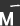
<style>
.page{position:relative;width:20px;height:26px;background:#333333}
.page>*{position:absolute;margin:0}
.t1{font:12px "DFKaiShu-SB-Estd-BF";color:#ffffff;font-weight:bold}
.t2{font:18px "ArialMT";color:#ffffff;font-weight:bold}
</style>
<div class="page">
<p class="t1" style="left:10px;top:4px;width:10px;height:3px">一</p>
<p class="t2" style="left:0px;top:12px;width:13px;height:14px">M</p>
</div>
